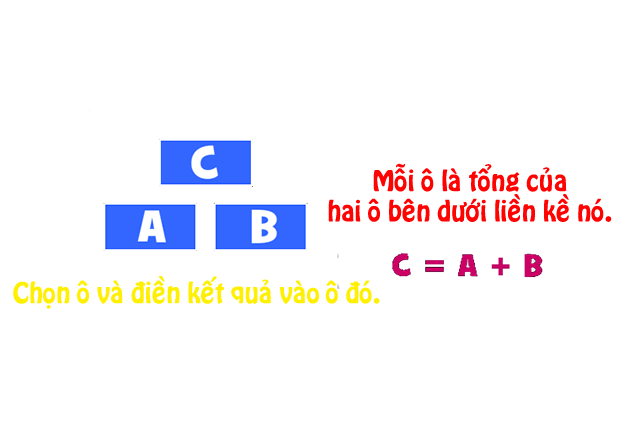
<style>
.page{position:relative;width:640px;height:421px;background:#ffffff}
.page>*{position:absolute;margin:0}
.t1{font:25.3px "VNI-Hobo";color:#ff0303}
.t2{font:25.3px "VNI-Hobo";color:#fff003}
</style>
<div class="page">
<p class="t1" style="left:328px;top:163px;width:284px;height:59px;text-align:center">Moãi oâ laø toång cuûa<br>hai oâ beân döôùi lieàn keà noù.</p>
<p class="t2" style="left:13px;top:276px;width:367px;height:33px">Choïn oâ vaø ñieàn keát quaû vaøo oâ ñoù.</p>
</div>
